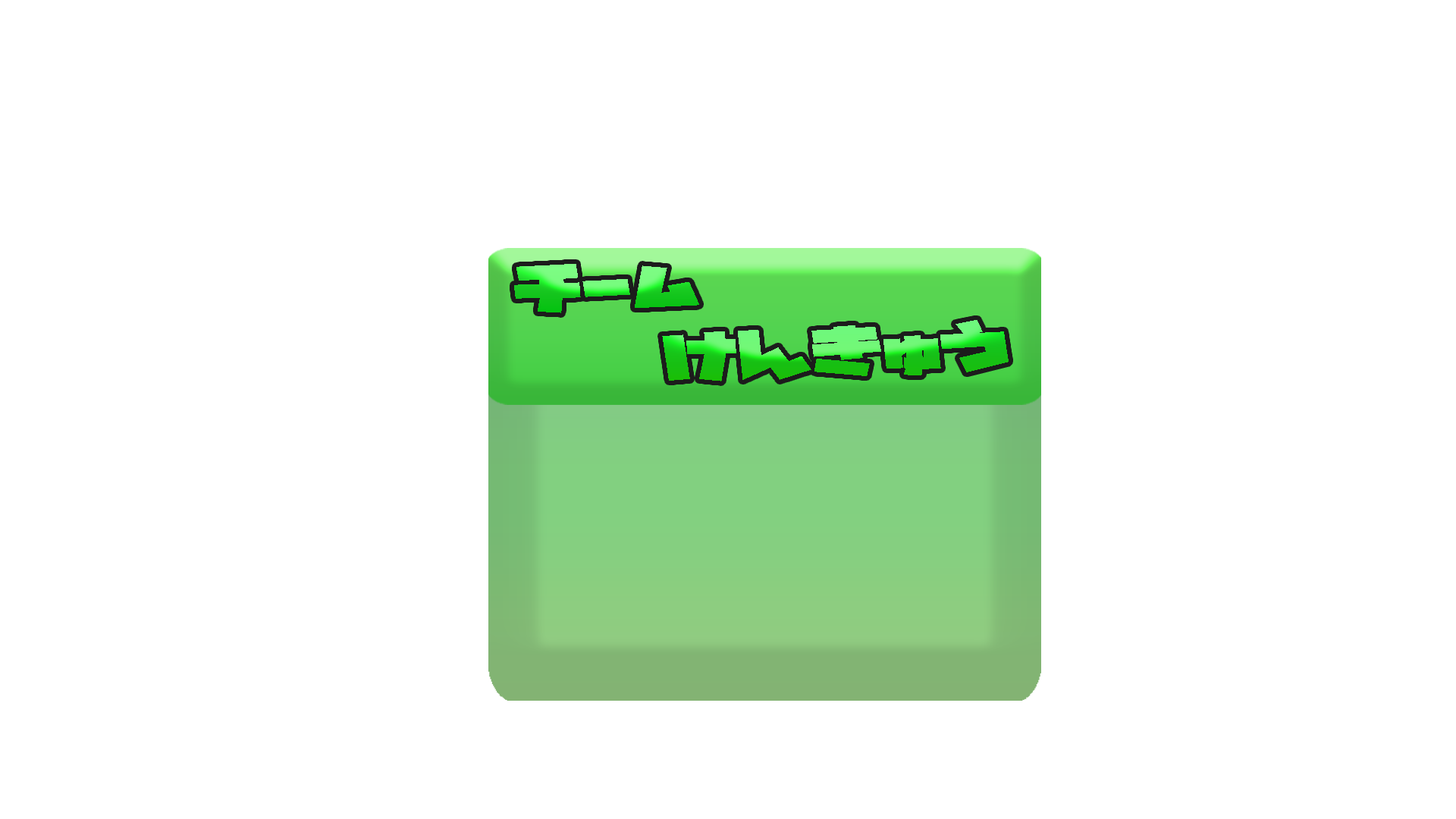
<style>
.page{position:relative;width:1456px;height:819px;background:#ffffff}
.page>*{position:absolute;margin:0}
.t1{font:54.6px "GN-KMBFont-UB-NewstyleKanaA";scale:1.49 1}
</style>
<div class="page">
<p class="t1" style="left:514px;top:264px;width:185px;height:49px;rotate:-1deg">チーム</p>
<p class="t1" style="left:662px;top:320px;width:347px;height:61px;rotate:-2deg">けんきゅう</p>
</div>
